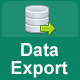
<style>
.page{position:relative;width:80px;height:80px;background:#098365}
.page>*{position:absolute;margin:0}
.t1{font:18px "Arial-BoldMT";color:#ffffff}
</style>
<div class="page">
<p class="t1" style="left:21px;top:43px;width:38px;height:14px">Data</p>
<p class="t1" style="left:11px;top:61px;width:57px;height:17px">Export</p>
</div>
